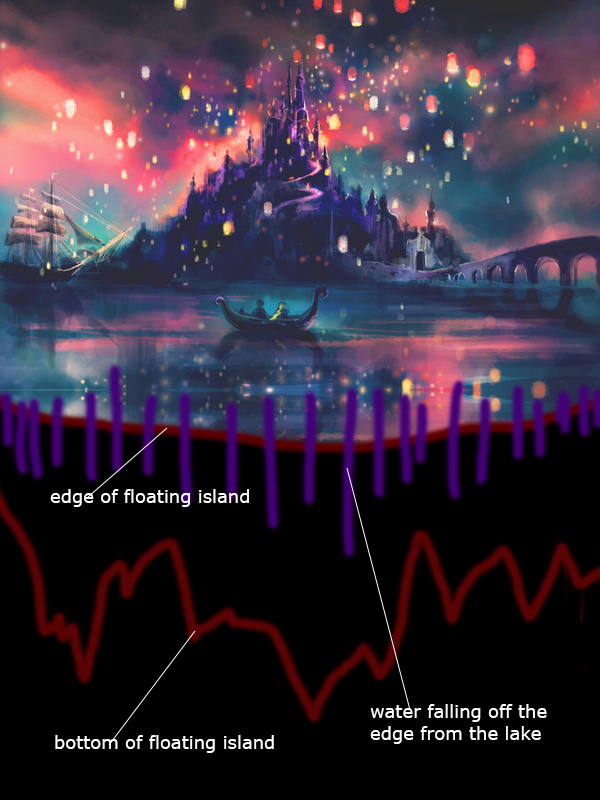
<style>
.page{position:relative;width:600px;height:800px;background:#000000}
.page>*{position:absolute;margin:0}
.t1{font:18px "Verdana";color:#fefefe}
</style>
<div class="page">
<p class="t1" style="left:50px;top:489px;width:199px;height:18px">edge of floating island</p>
<p class="t1" style="left:370px;top:704px;width:177px;height:40px">water falling off the<br>edge from the lake</p>
<p class="t1" style="left:55px;top:735px;width:219px;height:18px">bottom of floating island</p>
</div>
